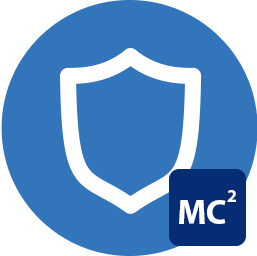
<style>
.page{position:relative;width:257px;height:256px;background:#3375bb}
.page>*{position:absolute;margin:0}
.t1{font:34.7px "MyriadPro-Bold";color:#fffefe}
.t2{font:17.8px "MyriadPro-Bold";color:#fffefe}
</style>
<div class="page">
<p class="t1" style="left:179px;top:190px;width:57px;height:34px">MC<span class="t2">2</span></p>
</div>
